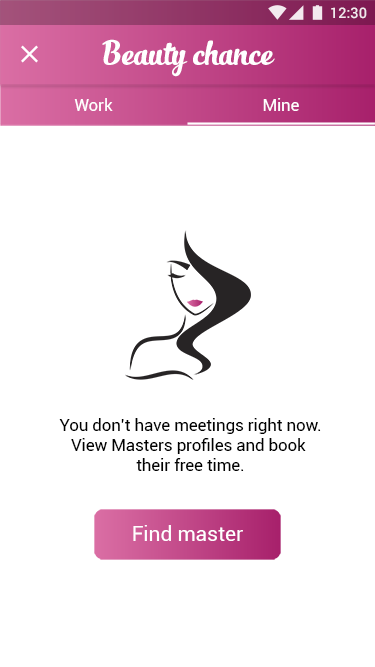
<style>
.page{position:relative;width:375px;height:667px;background:#ffffff}
.page>*{position:absolute;margin:0}
.t1{font:14.6px "Roboto-Medium";color:#ffffff}
.t2{font:25px "SlimTony-Italic";color:#ffffff}
.t3{font:16.7px "Roboto-Regular";color:#ffffff}
.t4{font:16.7px "Roboto-Regular";color:#000000}
.t5{font:20.8px "Roboto-Regular";color:#ffffff}
</style>
<div class="page">
<p class="t1" style="left:331px;top:7px;width:36px;height:12px">12:30</p>
<p class="t2" style="left:102px;top:39px;width:173px;height:38px">Beauty chance</p>
<p class="t3" style="left:74px;top:98px;width:39px;height:13px">Work</p>
<p class="t3" style="left:263px;top:98px;width:36px;height:13px">Mine</p>
<p class="t4" style="left:59px;top:418px;width:262px;height:53px;text-align:center">You don’t have meetings right now.<br>View Masters profiles and book <br>their free time.</p>
<p class="t5" style="left:133px;top:525px;width:110px;height:16px">Find master</p>
</div>
